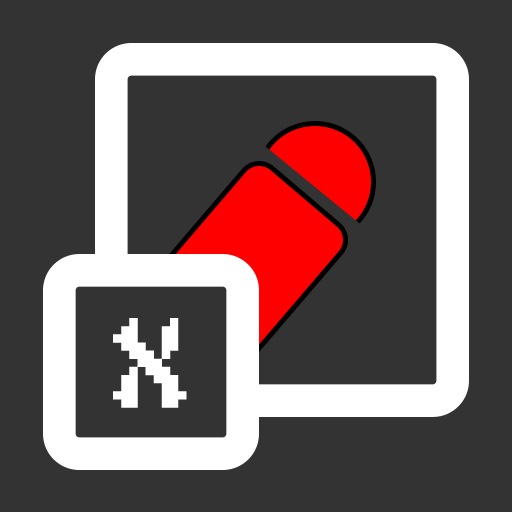
<style>
.page{position:relative;width:512px;height:512px;background:#333333}
.page>*{position:absolute;margin:0}
.t1{font:130px "Alagard";color:#ffffff}
</style>
<div class="page">
<p class="t1" style="left:113px;top:318px;width:74px;height:90px">X</p>
</div>
